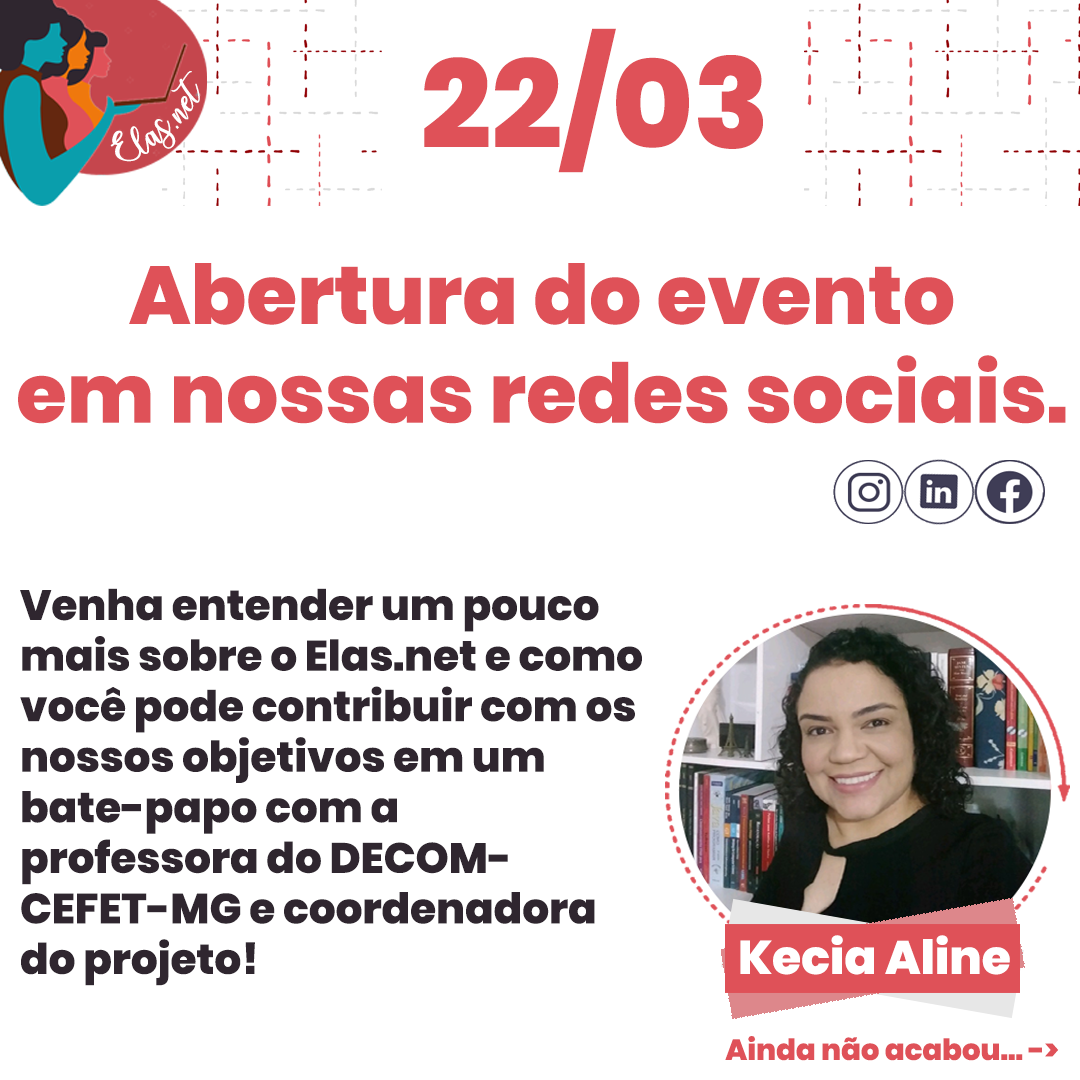
<style>
.page{position:relative;width:1080px;height:1080px;background:#ffffff}
.page>*{position:absolute;margin:0}
.t1{font:125.1px "Poppins-ExtraBold";color:#df5158}
.t2{font:25.7px "charlinda-Regular";color:#ffffff;scale:1.18 1}
.t3{font:82.1px "Poppins-ExtraBold";color:#df5158}
.t4{font:42.1px "Poppins-ExtraBold";color:#2f262f}
.t5{font:47.1px "Poppins-ExtraBold";color:#ffffff}
.t6{font:29.1px "Poppins-ExtraBold";color:#df5158}
</style>
<div class="page">
<p class="t1" style="left:424px;top:28px;width:339px;height:145px">22/03</p>
<p class="t2" style="left:110px;top:71px;width:90px;height:91px;rotate:-43deg">Elas.net</p>
<p class="t3" style="left:18px;top:263px;width:1048px;height:161px;text-align:center">Abertura do evento<br>em nossas redes sociais.</p>
<p class="t4" style="left:20px;top:588px;width:622px;height:398px">Venha entender um pouco<br>mais sobre o Elas.net e como<br>você pode contribuir com os <br>nossos objetivos em um<br>bate-papo com a <br>professora do DECOM-<br>CEFET-MG e coordenadora<br>do projeto!</p>
<p class="t5" style="left:740px;top:935px;width:270px;height:40px">Kecia Aline</p>
<p class="t6" style="left:725px;top:1036px;width:334px;height:25px">Ainda não acabou... -&gt;</p>
</div>
